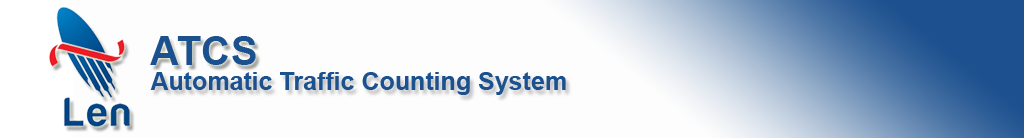
<style>
.page{position:relative;width:1024px;height:138px;background:#fdfdfd}
.page>*{position:absolute;margin:0}
.t1{font:40.5px "Arial-BoldMT";color:#1c518f}
.t2{font:25px "Arial-BoldMT";color:#1c518f}
</style>
<div class="page">
<p class="t1" style="left:150px;top:36px;width:106px;height:29px">ATCS</p>
<p class="t2" style="left:150px;top:72px;width:416px;height:23px">Automatic Traffic Counting System</p>
</div>
